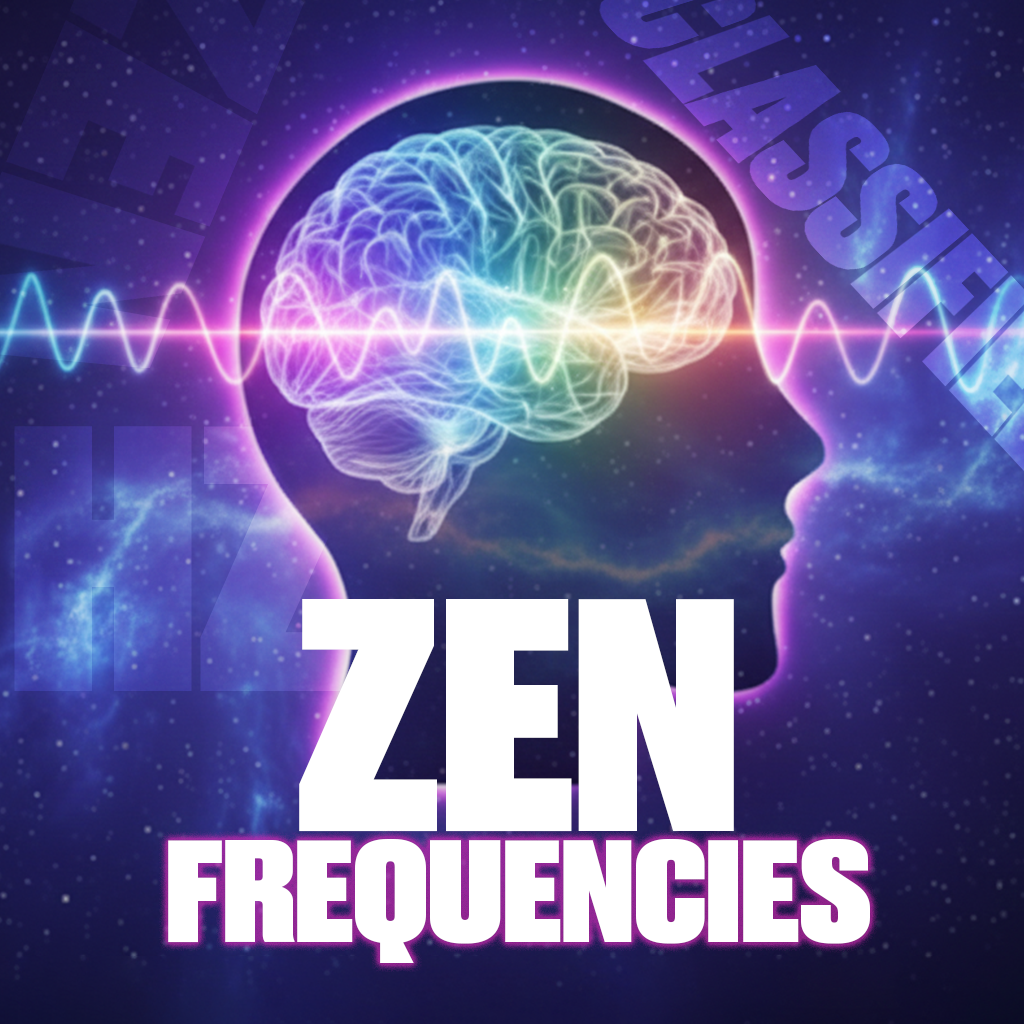
<style>
.page{position:relative;width:1024px;height:1024px}
.page>*{position:absolute;margin:0}
.t1{font:334px "Druk-Heavy";color:#ffffff;text-transform:uppercase;scale:1.21 1}
.t2{font:146.6px "Druk-Heavy";color:#ffffff;text-transform:uppercase;scale:1.21 1}
</style>
<div class="page">
<p class="t1" style="left:299px;top:599px;width:435px;height:233px">ZEN</p>
<p class="t2" style="left:168px;top:839px;width:702px;height:124px">FREQUENCIES</p>
</div>
